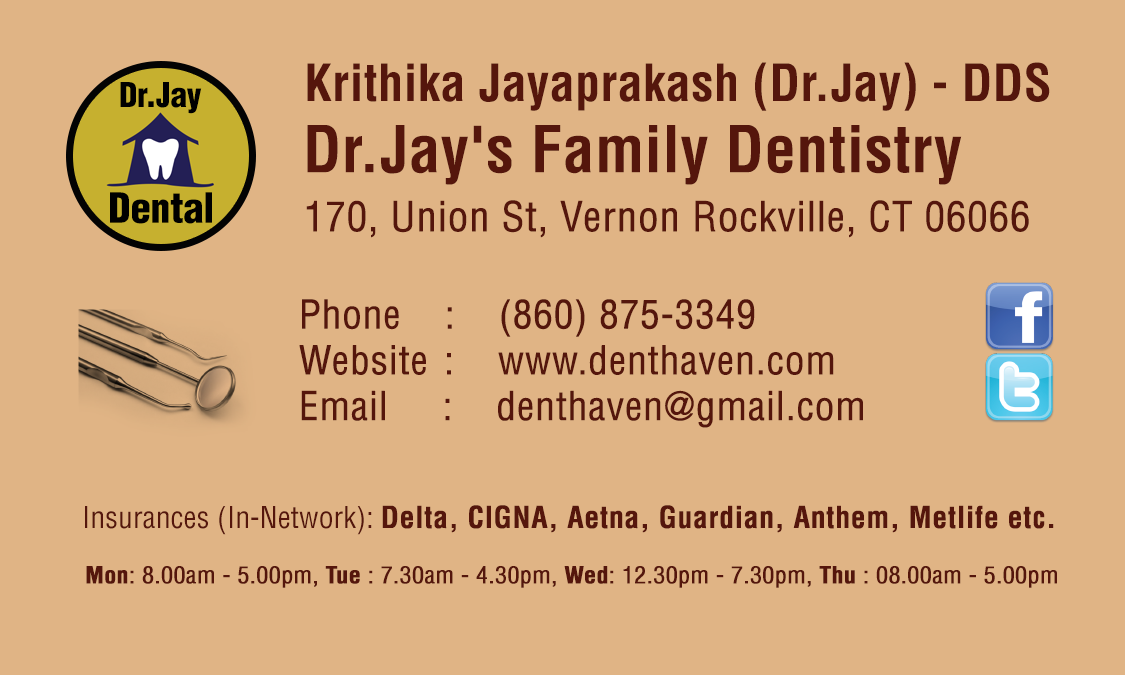
<style>
.page{position:relative;width:1125px;height:675px;background:#e0b485}
.page>*{position:absolute;margin:0}
.t1{font:50.1px "HelveticaLT-Condensed-Bold";letter-spacing:0.01em;color:#55160c}
.t2{font:33.2px "HelveticaLT-Condensed-Black";letter-spacing:-0.01em;color:#000000}
.t3{font:63px "HelveticaLT-Condensed-Bold";letter-spacing:0.01em;color:#55160c}
.t4{font:40.5px "HelveticaLT-Condensed-Black";letter-spacing:-0.01em;color:#000000}
.t5{font:40.2px "HelveticaLT-Condensed";color:#55160c;font-weight:bold}
.t6{font:38.6px/45.8px "HelveticaLT-Condensed";color:#55160c;font-weight:bold}
.t7{font:29.2px "HelveticaLT-Condensed-Bold";letter-spacing:0.005em;color:#55160c;font-weight:bold}
.t8{font:29.2px "HelveticaLT-Condensed";letter-spacing:0.005em;color:#55160c}
.t9{font:23.1px "HelveticaLT-Condensed";color:#55160c;font-weight:bold}
.t10{font:23.1px "HelveticaLT-Condensed-Bold";color:#55160c;font-weight:bold}
</style>
<div class="page">
<p class="t1" style="left:307px;top:62px;width:743px;height:49px">Krithika Jayaprakash (Dr.Jay) - DDS</p>
<p class="t2" style="left:120px;top:82px;width:82px;height:32px">Dr.Jay</p>
<p class="t3" style="left:307px;top:125px;width:655px;height:60px">Dr.Jay's Family Dentistry</p>
<p class="t4" style="left:110px;top:192px;width:102px;height:32px">Dental</p>
<p class="t5" style="left:306px;top:200px;width:723px;height:38px">170, Union St, Vernon Rockville, CT 06066</p>
<p class="t6" style="left:299px;top:299px;width:564px;height:129px">Phone    :    (860) 875-3349<br>Website :    www.denthaven.com<br>Email     :    denthaven@gmail.com</p>
<p class="t7" style="left:85px;top:505px;width:969px;height:30px"><span class="t8">Insurances (In-Network): </span>Delta, CIGNA, Aetna, Guardian, Anthem, Metlife etc.</p>
<p class="t9" style="left:86px;top:566px;width:971px;height:22px"><span class="t10">Mon</span>: 8.00am - 5.00pm, <span class="t10">Tue</span> : 7.30am - 4.30pm, <span class="t10">Wed</span>: 12.30pm - 7.30pm, <span class="t10">Thu</span> : 08.00am - 5.00pm</p>
</div>
